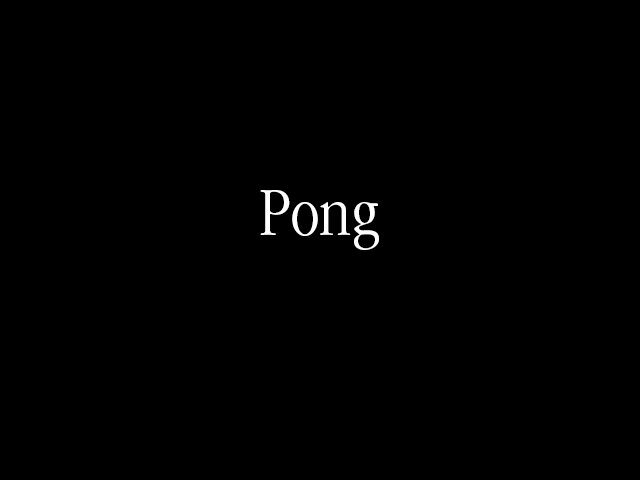
<style>
.page{position:relative;width:640px;height:480px;background:#000000}
.page>*{position:absolute;margin:0}
.t1{font:72px "ITCGaramondStd-LtCond";color:#ffffff}
</style>
<div class="page">
<p class="t1" style="left:260px;top:190px;width:119px;height:60px">Pong</p>
</div>
